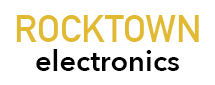
<style>
.page{position:relative;width:215px;height:85px;background:#ffffff}
.page>*{position:absolute;margin:0}
.t1{font:37.5px "DINAlternate-Bold";color:#e1ba31}
.t2{font:29.2px "AvenirNext-DemiBold";color:#000000}
</style>
<div class="page">
<p class="t1" style="left:16px;top:15px;width:183px;height:27px">ROCKTOWN</p>
<p class="t2" style="left:36px;top:49px;width:143px;height:22px">electronics</p>
</div>
